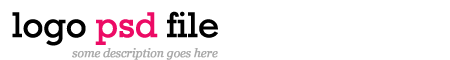
<style>
.page{position:relative;width:450px;height:60px;background:#ffffff}
.page>*{position:absolute;margin:0}
.t1{font:36px "Rockwell";letter-spacing:-0.025em;color:#000000;font-weight:bold}
.t2{font:36px "Rockwell";letter-spacing:-0.025em;color:#ec0b65;font-weight:bold}
.t3{font:12px "Georgia-Italic";letter-spacing:-0.025em;color:#aaaaaa;font-weight:bold}
</style>
<div class="page">
<p class="t1" style="left:12px;top:11px;width:206px;height:35px">logo <span class="t2">psd</span> file</p>
<p class="t3" style="left:72px;top:48px;width:146px;height:12px">some description goes here</p>
</div>
